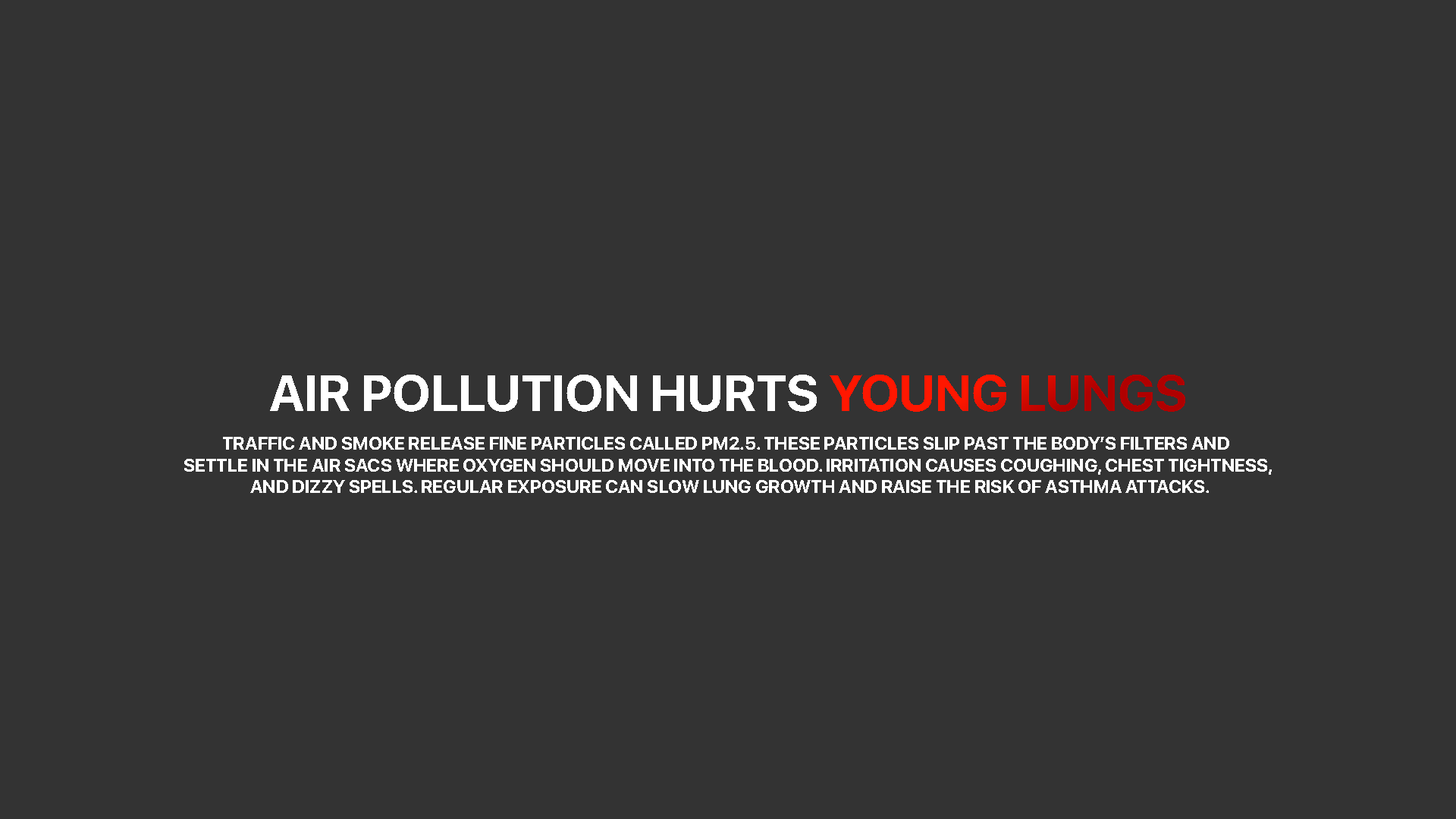
<style>
.page{position:relative;width:1456px;height:819px;background:#333333}
.page>*{position:absolute;margin:0}
.t1{font:51px "SFProDisplay-Bold";color:#ffffff;text-transform:uppercase}
.t2{font:18.3px "SFProDisplay-Bold";color:#ffffff;text-transform:uppercase}
</style>
<div class="page">
<p class="t1" style="left:270px;top:375px;width:915px;height:37px">Air Pollution Hurts Young Lungs</p>
<p class="t2" style="left:184px;top:437px;width:1088px;height:56px;text-align:center">Traffic and smoke release fine particles called PM2.5. These particles slip past the body’s filters and <br>settle in the air sacs where oxygen should move into the blood. Irritation causes coughing, chest tightness,<br> and dizzy spells. Regular exposure can slow lung growth and raise the risk of asthma attacks.</p>
</div>
